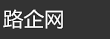
<style>
.page{position:relative;width:110px;height:39px;background:#333333}
.page>*{position:absolute;margin:0}
.t1{font:19.8px "MicrosoftYaHei";color:#ffffff;scale:1.04 1}
</style>
<div class="page">
<p class="t1" style="left:3px;top:9px;width:60px;height:20px">路企网</p>
<p class="t1" style="left:3px;top:9px;width:60px;height:20px">路企网</p>
</div>
